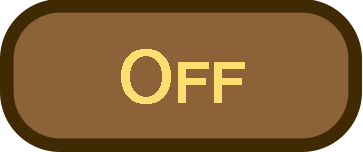
<style>
.page{position:relative;width:363px;height:152px;background:#8c6239}
.page>*{position:absolute;margin:0}
.t1{font:72px "ArialMT";letter-spacing:-0.025em;color:#fede70;font-variant:small-caps;font-weight:bold}
</style>
<div class="page">
<p class="t1" style="left:121px;top:49px;width:124px;height:55px">Off</p>
</div>
